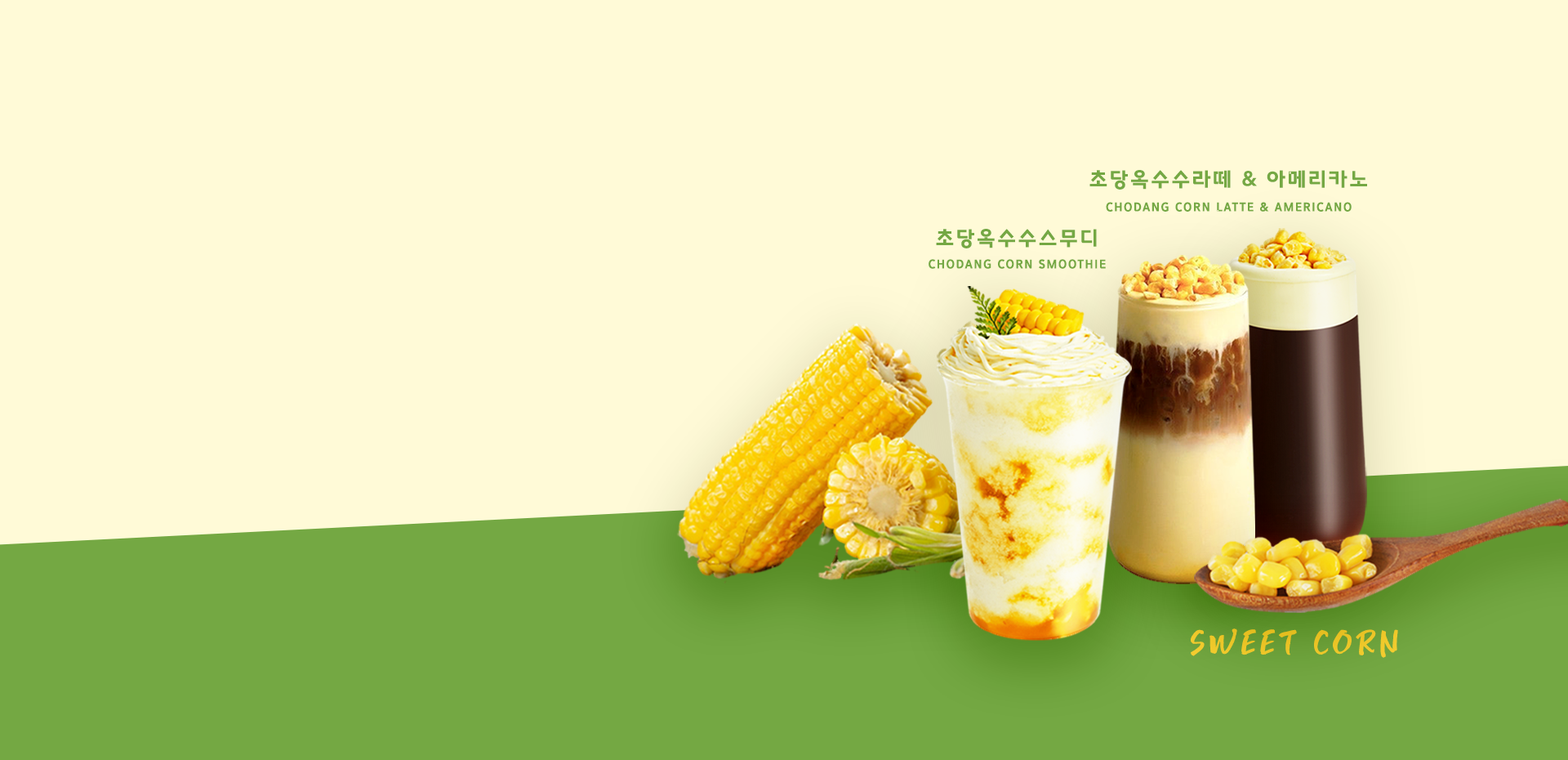
<style>
.page{position:relative;width:1568px;height:760px;background:#fffad7}
.page>*{position:absolute;margin:0}
.t1{font:20.4px "BinggraeMelona-Bold";letter-spacing:0.1em;color:#74a843}
.t2{font:12.2px "BinggraeMelona-Bold";letter-spacing:0.1em;color:#74a843}
.t3{font:32.7px "Yeongwol-Regular";letter-spacing:0.1em;color:#f6cf32}
</style>
<div class="page">
<p class="t1" style="left:1089px;top:170px;width:278px;height:19px">초당옥수수라떼 &amp; 아메리카노</p>
<p class="t2" style="left:1106px;top:202px;width:246px;height:10px">CHODANG CORN LATTE &amp; AMERICANO</p>
<p class="t1" style="left:936px;top:229px;width:161px;height:19px">초당옥수수스무디</p>
<p class="t2" style="left:929px;top:259px;width:177px;height:10px">CHODANG CORN SMOOTHIE</p>
<p class="t3" style="left:1191px;top:628px;width:207px;height:29px">SWEET CORN</p>
</div>
